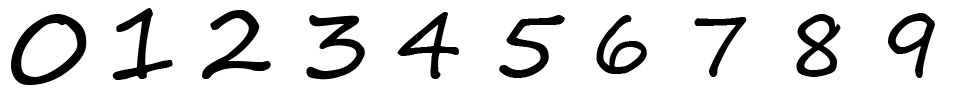
<style>
.page{position:relative;width:960px;height:96px;background:#ffffff}
.page>*{position:absolute;margin:0}
.t1{font:104.1px "SegoePrint";color:#000000}
.t2{font:103.4px "SegoePrint";color:#000000;scale:0.96 1}
.t3{font:96.6px "SegoePrint";color:#000000;scale:1.04 1}
.t4{font:98.9px "SegoePrint";color:#000000}
.t5{font:92.4px "SegoePrint";color:#000000}
.t6{font:95.9px "SegoePrint";color:#000000}
.t7{font:89.6px "SegoePrint";color:#000000;scale:0.95 1}
.t8{font:91.2px "SegoePrint";color:#000000}
.t9{font:97.2px "SegoePrint";color:#000000;scale:0.95 1}
.t10{font:100px "SegoePrint";color:#000000;scale:0.93 1}
</style>
<div class="page">
<p class="t1" style="left:11px;top:14px;width:76px;height:71px">0</p>
<p class="t2" style="left:112px;top:8px;width:61px;height:72px">1</p>
<p class="t3" style="left:202px;top:10px;width:69px;height:69px">2</p>
<p class="t4" style="left:306px;top:15px;width:59px;height:65px">3</p>
<p class="t5" style="left:397px;top:12px;width:62px;height:67px">4</p>
<p class="t6" style="left:499px;top:15px;width:66px;height:63px">5</p>
<p class="t7" style="left:596px;top:15px;width:51px;height:59px">6</p>
<p class="t8" style="left:694px;top:17px;width:53px;height:60px">7</p>
<p class="t9" style="left:796px;top:14px;width:45px;height:63px">8</p>
<p class="t10" style="left:888px;top:13px;width:47px;height:65px">9</p>
</div>
